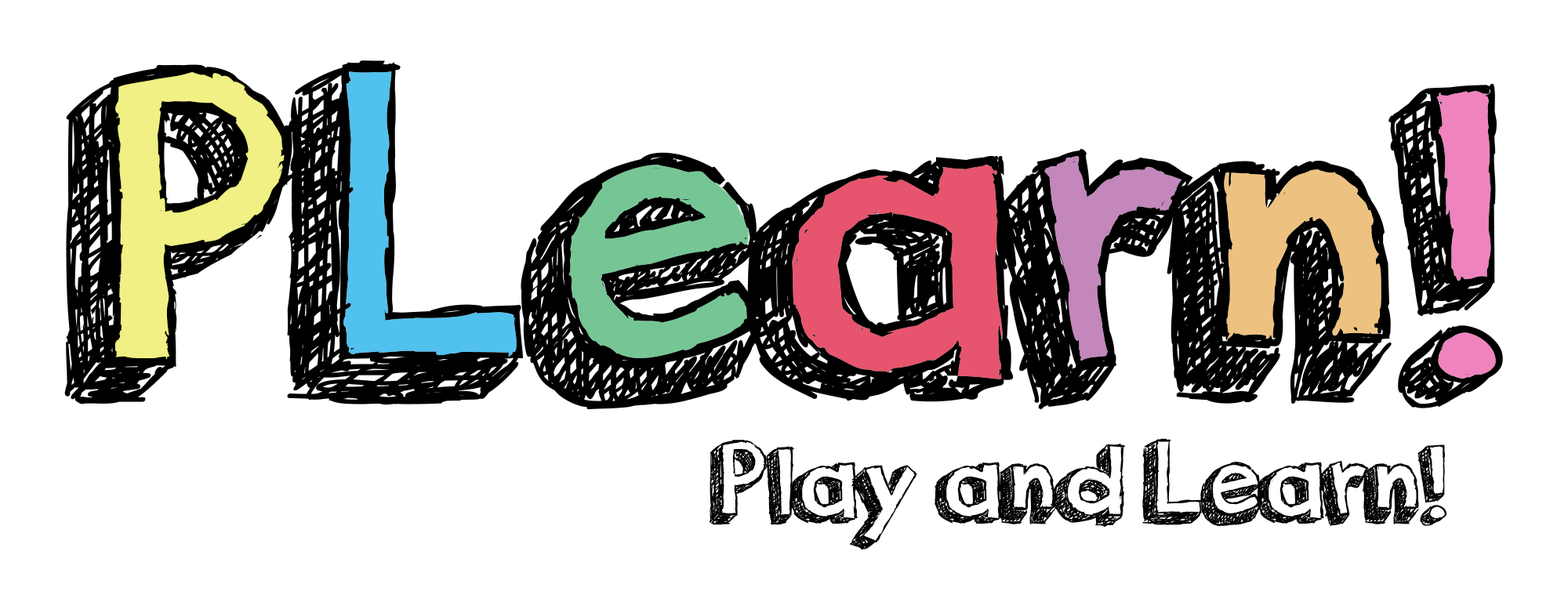
<style>
.page{position:relative;width:1568px;height:602px;background:#ffffff}
.page>*{position:absolute;margin:0}
.t1{font:470.4px "orangejuice";color:#000000}
.t2{font:117.6px "orangejuice";color:#010101}
</style>
<div class="page">
<p class="t1" style="left:64px;top:60px;width:1439px;height:350px">PLearn!</p>
<p class="t2" style="left:710px;top:438px;width:736px;height:112px">Play and Learn!</p>
</div>
